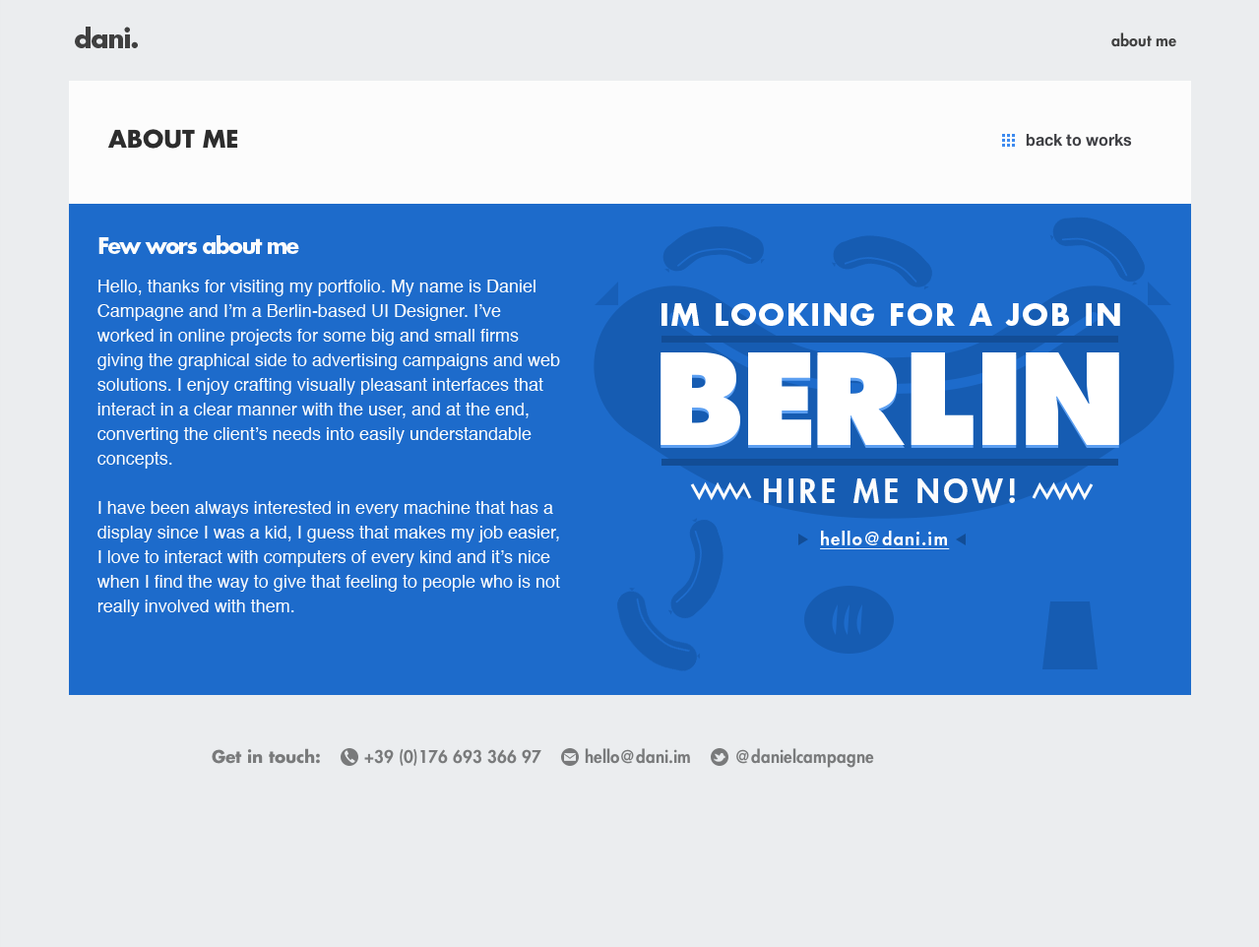
<style>
.page{position:relative;width:1259px;height:947px;background:#ebedef}
.page>*{position:absolute;margin:0}
.t1{font:21.7px "FuturaStd-Bold";letter-spacing:-0.07em;color:#fcfcfc}
.t2{font:17.7px/24.6px "Helvetica";color:#fcfcfc}
.t3{font:29.5px "FuturaStd-Bold";letter-spacing:0.065em;color:#ffffff;text-transform:uppercase}
.t4{font:123.1px "FuturaStd-ExtraBold";color:#ffffff}
.t5{font:123.1px "FuturaStd-ExtraBold";letter-spacing:-0.02em;color:#ffffff}
.t6{font:123.1px "FuturaStd-ExtraBold";letter-spacing:-0.06em;color:#ffffff}
.t7{font:123.1px "FuturaStd-ExtraBold";letter-spacing:-0.04em;color:#ffffff}
.t8{font:31.5px "FuturaStd-Heavy";letter-spacing:0.13em;color:#fcfcfc;text-transform:uppercase}
.t9{font:17.7px "FuturaStd-Heavy";letter-spacing:0.075em;color:#ffffff;text-decoration:underline}
</style>
<div class="page">
<p class="t1" style="left:98px;top:235px;width:201px;height:19px">Few wors about me</p>
<p class="t2" style="left:97px;top:280px;width:463px;height:336px">Hello, thanks for visiting my portfolio. My name is Daniel Campagne and I’m a Berlin-based UI Designer. I’ve worked in online projects for some big and small firms giving the graphical side to advertising campaigns and web solutions. I enjoy crafting visually pleasant interfaces that interact in a clear manner with the user, and at the end, converting the client’s needs into easily understandable concepts.<br><br>I have been always interested in every machine that has a display since I was a kid, I guess that makes my job easier, I love to interact with computers of every kind and it’s nice when I find the way to give that feeling to people who is not really involved with them.<br><br>You want to now more about me? Just mail me.</p>
<p class="t3" style="left:662px;top:303px;width:458px;height:23px">Im looking FOR A JOB IN</p>
<p class="t4" style="left:661px;top:352px;width:458px;height:93px"><span class="t5">B</span><span class="t6">E</span>RL<span class="t7">I</span>N</p>
<p class="t4" style="left:661px;top:355px;width:458px;height:93px"><span class="t5">B</span><span class="t6">E</span>RL<span class="t7">I</span>N</p>
<p class="t8" style="left:764px;top:478px;width:251px;height:25px">HIRE ME now!</p>
<p class="t9" style="left:820px;top:531px;width:130px;height:18px">hello@dani.im</p>
</div>
